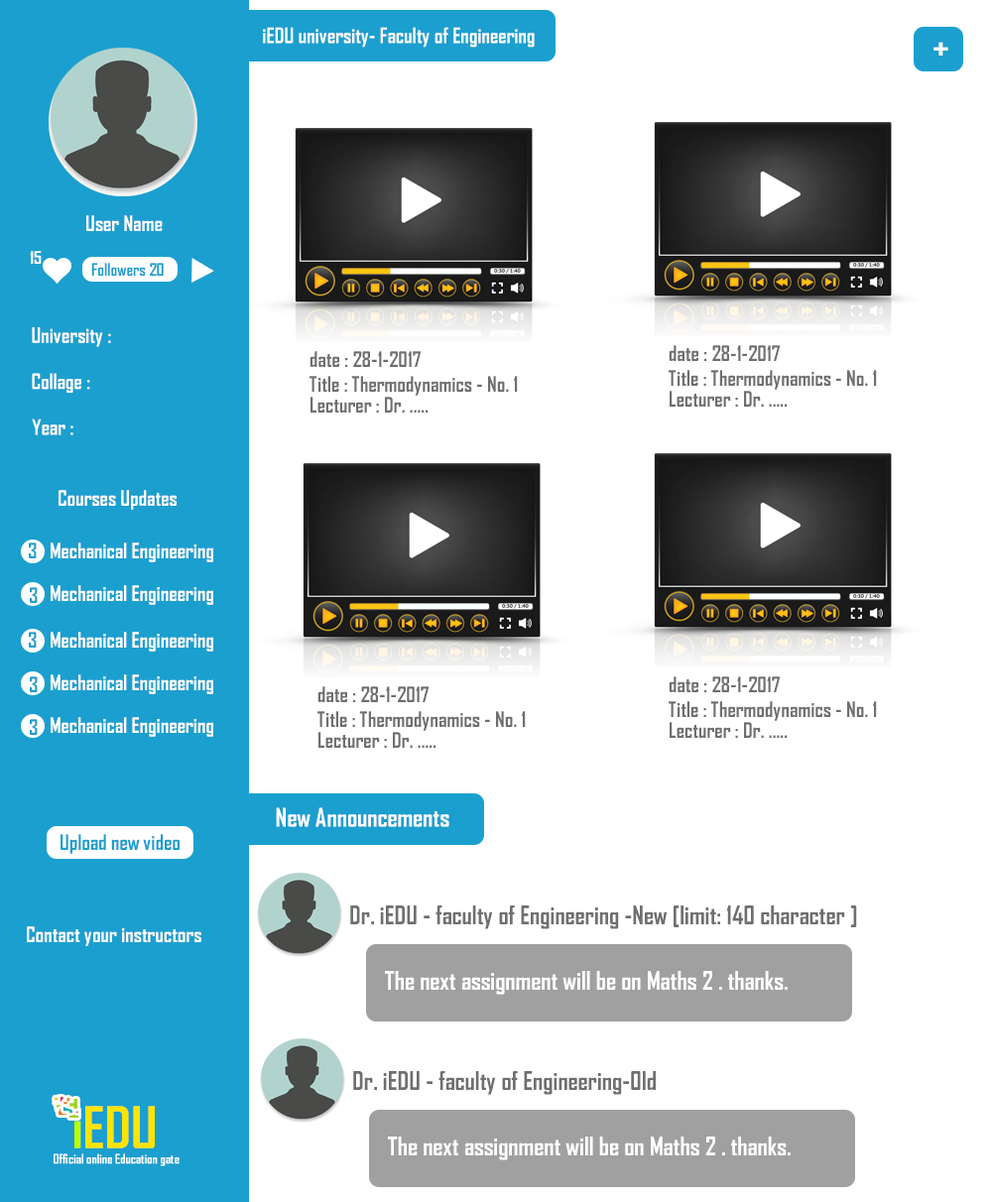
<style>
.page{position:relative;width:992px;height:1202px;background:#ffffff}
.page>*{position:absolute;margin:0}
.t1{font:20.7px "AgencyFB-Bold";color:#ffffff}
.t2{font:34.7px "AgencyFB-Bold";color:#ffffff}
.t3{font:16.5px "AgencyFB-Bold";color:#ffffff}
.t4{font:16.5px "AgencyFB-Bold";color:#1b9fcf}
.t5{font:20.7px "AgencyFB-Bold";color:#6f6f6f}
.t6{font:20.7px "AgencyFB-Bold";color:#1b9fcf}
.t7{font:24.8px "AgencyFB-Bold";color:#ffffff}
.t8{font:24.8px "AgencyFB-Bold";color:#6f6f6f}
.t9{font:54.9px "AgencyFB-Bold";color:#ffe400}
.t10{font:54.9px "AgencyFB-Bold";color:#beff03}
.t11{font:12.8px "AgencyFB-Bold";color:#ffffff}
</style>
<div class="page">
<p class="t1" style="left:263px;top:27px;width:272px;height:21px">iEDU university- Faculty of Engineering</p>
<p class="t2" style="left:933px;top:42px;width:15px;height:14px">+</p>
<p class="t1" style="left:86px;top:215px;width:77px;height:16px">User Name</p>
<p class="t3" style="left:30px;top:251px;width:12px;height:13px">15</p>
<p class="t4" style="left:91px;top:263px;width:73px;height:13px">Followers 20</p>
<p class="t1" style="left:32px;top:327px;width:79px;height:20px">University :</p>
<p class="t5" style="left:309px;top:351px;width:112px;height:16px">date : 28-1-2017</p>
<p class="t5" style="left:669px;top:345px;width:111px;height:16px">date : 28-1-2017</p>
<p class="t1" style="left:32px;top:373px;width:58px;height:20px">Collage :</p>
<p class="t5" style="left:309px;top:376px;width:209px;height:20px">Title : Thermodynamics - No. 1</p>
<p class="t5" style="left:669px;top:370px;width:208px;height:20px">Title : Thermodynamics - No. 1</p>
<p class="t5" style="left:310px;top:397px;width:118px;height:16px">Lecturer : Dr. .....</p>
<p class="t5" style="left:670px;top:391px;width:118px;height:16px">Lecturer : Dr. .....</p>
<p class="t1" style="left:32px;top:419px;width:41px;height:16px">Year :</p>
<p class="t1" style="left:59px;top:490px;width:118px;height:20px">Courses Updates</p>
<p class="t6" style="left:29px;top:543px;width:8px;height:15px">3</p>
<p class="t1" style="left:51px;top:543px;width:162px;height:19px">Mechanical Engineering</p>
<p class="t6" style="left:30px;top:587px;width:8px;height:16px">3</p>
<p class="t1" style="left:51px;top:585px;width:162px;height:20px">Mechanical Engineering</p>
<p class="t6" style="left:29px;top:632px;width:8px;height:16px">3</p>
<p class="t1" style="left:51px;top:632px;width:162px;height:20px">Mechanical Engineering</p>
<p class="t6" style="left:30px;top:676px;width:8px;height:16px">3</p>
<p class="t1" style="left:51px;top:674px;width:162px;height:20px">Mechanical Engineering</p>
<p class="t5" style="left:669px;top:676px;width:111px;height:16px">date : 28-1-2017</p>
<p class="t5" style="left:317px;top:686px;width:111px;height:16px">date : 28-1-2017</p>
<p class="t5" style="left:669px;top:701px;width:208px;height:20px">Title : Thermodynamics - No. 1</p>
<p class="t5" style="left:317px;top:711px;width:209px;height:20px">Title : Thermodynamics - No. 1</p>
<p class="t6" style="left:30px;top:719px;width:8px;height:16px">3</p>
<p class="t1" style="left:51px;top:717px;width:162px;height:20px">Mechanical Engineering</p>
<p class="t5" style="left:670px;top:722px;width:118px;height:16px">Lecturer : Dr. .....</p>
<p class="t5" style="left:318px;top:732px;width:118px;height:16px">Lecturer : Dr. .....</p>
<p class="t7" style="left:276px;top:807px;width:173px;height:20px">New Announcements</p>
<p class="t6" style="left:61px;top:834px;width:119px;height:20px">Upload new video</p>
<p class="t8" style="left:350px;top:906px;width:507px;height:23px">Dr. iEDU - faculty of Engineering -New [limit: 140 character ]</p>
<p class="t1" style="left:27px;top:926px;width:174px;height:20px">Contact your instructors</p>
<p class="t7" style="left:385px;top:971px;width:403px;height:24px">The next assignment will be on Maths 2 . thanks.</p>
<p class="t8" style="left:353px;top:1071px;width:303px;height:24px">Dr. iEDU - faculty of Engineering-Old</p>
<p class="t9" style="left:74px;top:1106px;width:81px;height:43px"><span class="t10">i</span>EDU</p>
<p class="t7" style="left:388px;top:1137px;width:403px;height:24px">The next assignment will be on Maths 2 . thanks.</p>
<p class="t11" style="left:54px;top:1154px;width:126px;height:12px">Official online Education gate</p>
</div>
